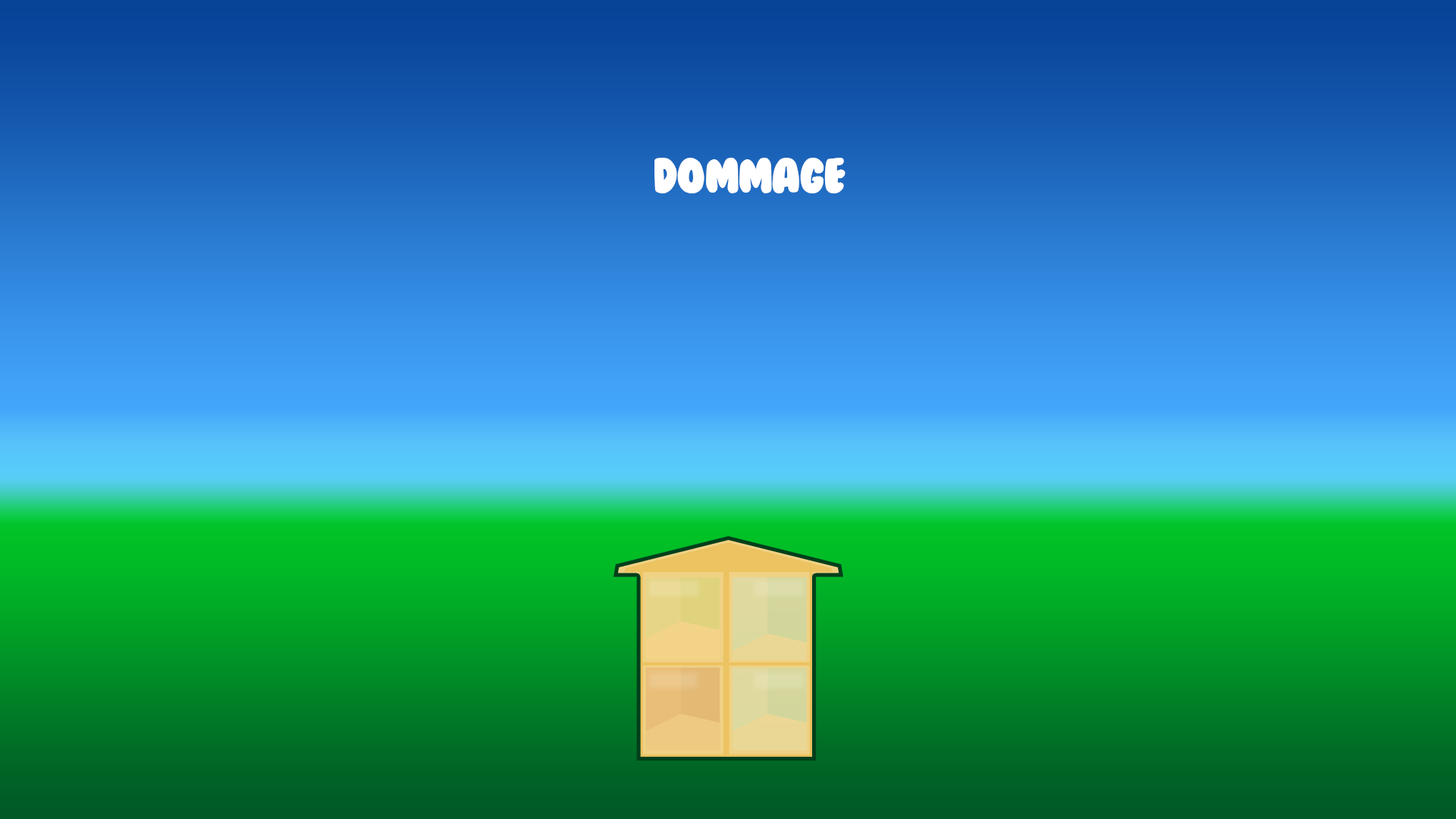
<style>
.page{position:relative;width:1456px;height:819px}
.page>*{position:absolute;margin:0}
.t1{font:45.5px "BubbleGum";letter-spacing:-0.035em;color:#ffffff}
</style>
<div class="page">
<p class="t1" style="left:654px;top:158px;width:192px;height:35px">Dommage</p>
</div>
